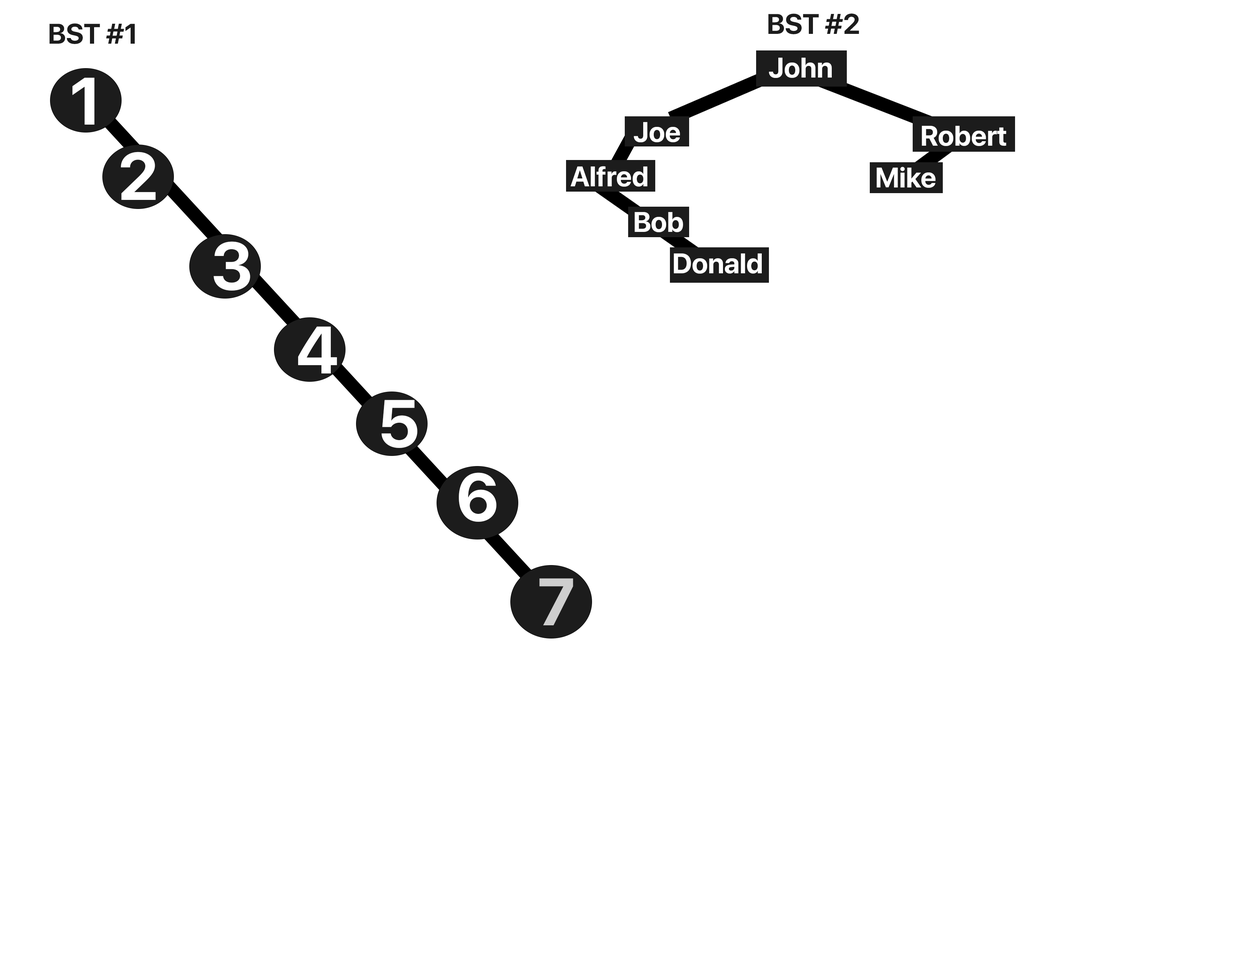
<style>
.page{position:relative;width:1242px;height:960px;background:#ffffff}
.page>*{position:absolute;margin:0}
.t1{font:28.2px "SFProDisplay-Bold";color:#1c1c1c}
.t2{font:28.2px "SFProDisplay-Bold";color:#ffffff}
.t3{font:66.5px "SFProDisplay-Bold";color:#ffffff}
.t4{font:66.5px "SFProDisplay-Bold";color:#cecece}
</style>
<div class="page">
<p class="t1" style="left:768px;top:14px;width:91px;height:20px">BST #2</p>
<p class="t1" style="left:49px;top:23px;width:86px;height:21px">BST #1</p>
<p class="t2" style="left:769px;top:58px;width:63px;height:20px">John</p>
<p class="t3" style="left:72px;top:78px;width:22px;height:47px">1</p>
<p class="t2" style="left:634px;top:122px;width:46px;height:20px">Joe</p>
<p class="t2" style="left:922px;top:126px;width:85px;height:20px">Robert</p>
<p class="t3" style="left:121px;top:152px;width:35px;height:48px">2</p>
<p class="t2" style="left:571px;top:166px;width:76px;height:21px">Alfred</p>
<p class="t2" style="left:877px;top:167px;width:59px;height:21px">Mike</p>
<p class="t2" style="left:635px;top:212px;width:48px;height:20px">Bob</p>
<p class="t3" style="left:213px;top:241px;width:37px;height:50px">3</p>
<p class="t2" style="left:674px;top:253px;width:88px;height:21px">Donald</p>
<p class="t3" style="left:298px;top:326px;width:39px;height:47px">4</p>
<p class="t3" style="left:381px;top:400px;width:36px;height:48px">5</p>
<p class="t3" style="left:459px;top:472px;width:38px;height:50px">6</p>
<p class="t4" style="left:539px;top:578px;width:34px;height:47px">7</p>
</div>
